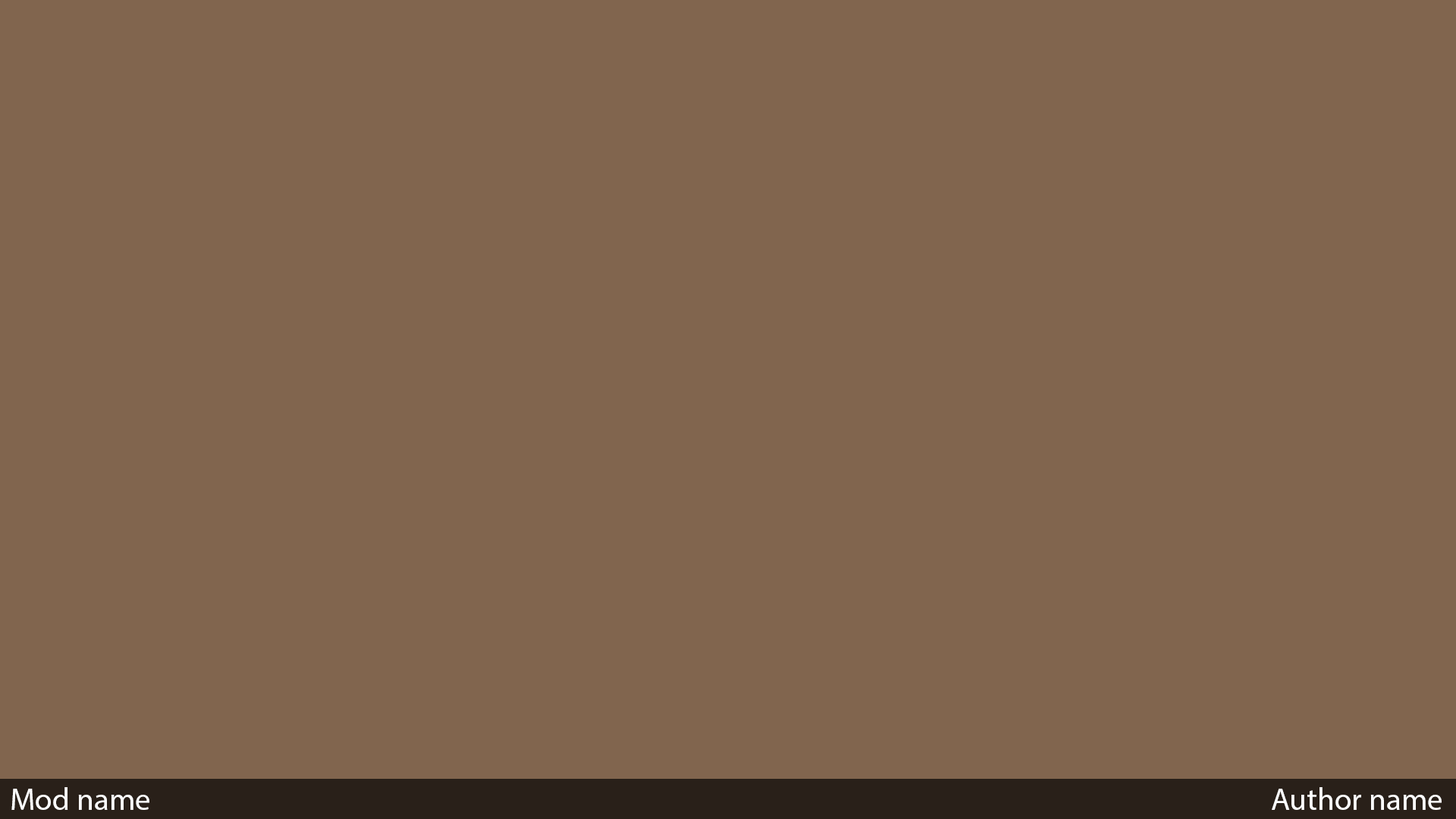
<style>
.page{position:relative;width:1456px;height:819px;background:#81654e}
.page>*{position:absolute;margin:0}
.t1{font:31.3px "MyriadPro-Regular";color:#ffffff}
</style>
<div class="page">
<p class="t1" style="left:11px;top:787px;width:138px;height:23px">Mod name</p>
<p class="t1" style="left:1272px;top:787px;width:170px;height:23px">Author name</p>
</div>
